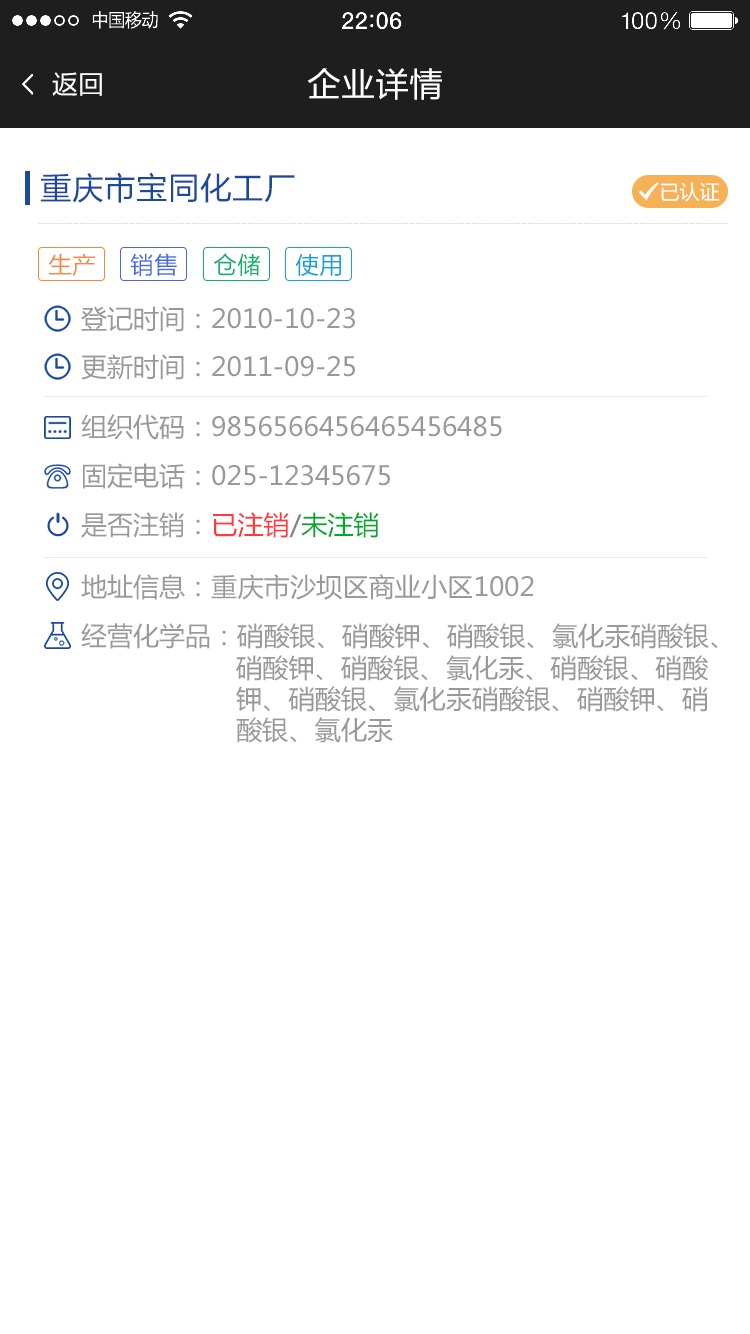
<style>
.page{position:relative;width:750px;height:1334px;background:#ffffff}
.page>*{position:absolute;margin:0}
.t1{font:26px "FZLTHJW--GB1-0";color:#ffffff}
.t2{font:34px "FZLTHJW--GB1-0";color:#ffffff}
.t3{font:32px "FZLTHJW--GB1-0";color:#1b4a9c}
.t4{font:20px "MicrosoftYaHei";color:#ffffff}
.t5{font:24px "FZLTHJW--GB1-0";color:#ef8b42;text-transform:uppercase}
.t6{font:24px "FZLTHJW--GB1-0";color:#486ad9;text-transform:uppercase}
.t7{font:24px "FZLTHJW--GB1-0";color:#11ae6d;text-transform:uppercase}
.t8{font:24px "FZLTHJW--GB1-0";color:#17a2d6;text-transform:uppercase}
.t9{font:26px "MicrosoftYaHei";color:#999999}
.t10{font:26px "MicrosoftYaHei";color:#9b9b9b}
.t11{font:26px "MicrosoftYaHei";color:#ff3a3a}
.t12{font:26px "MicrosoftYaHei";color:#818181}
.t13{font:26px "MicrosoftYaHei";color:#03a82a}
.t14{font:26px/0.4px "MicrosoftYaHei";color:#999999}
</style>
<div class="page">
<p class="t1" style="left:52px;top:72px;width:50px;height:24px">返回</p>
<p class="t2" style="left:307px;top:68px;width:135px;height:32px">企业详情</p>
<p class="t3" style="left:40px;top:172px;width:255px;height:31px">重庆市宝同化工厂</p>
<p class="t4" style="left:660px;top:182px;width:60px;height:20px">已认证</p>
<p class="t5" style="left:48px;top:253px;width:48px;height:23px">生产</p>
<p class="t6" style="left:130px;top:253px;width:47px;height:23px">销售</p>
<p class="t7" style="left:214px;top:253px;width:47px;height:23px">仓储</p>
<p class="t8" style="left:295px;top:253px;width:46px;height:24px">使用</p>
<p class="t9" style="left:81px;top:306px;width:274px;height:26px">登记时间：2010-10-23</p>
<p class="t9" style="left:81px;top:354px;width:274px;height:26px">更新时间：2011-09-25</p>
<p class="t9" style="left:81px;top:414px;width:421px;height:26px">组织代码：9856566456465456485</p>
<p class="t9" style="left:83px;top:463px;width:307px;height:26px">固定电话：025-12345675</p>
<p class="t10" style="left:81px;top:512px;width:298px;height:26px">是否注销：<span class="t11">已注销</span><span class="t12">/</span><span class="t13">未注销</span></p>
<p class="t9" style="left:81px;top:574px;width:453px;height:26px">地址信息：重庆市沙坝区商业小区1002</p>
<p class="t9" style="left:81px;top:623px;width:637px;height:120px"><span class="t14">经营化学品：</span>硝酸银、硝酸钾、硝酸银、氯化汞硝酸银、<br>                    硝酸钾、硝酸银、氯化汞、硝酸银、硝酸<br>                    钾、硝酸银、氯化汞硝酸银、硝酸钾、硝<br>                    酸银、氯化汞</p>
</div>
